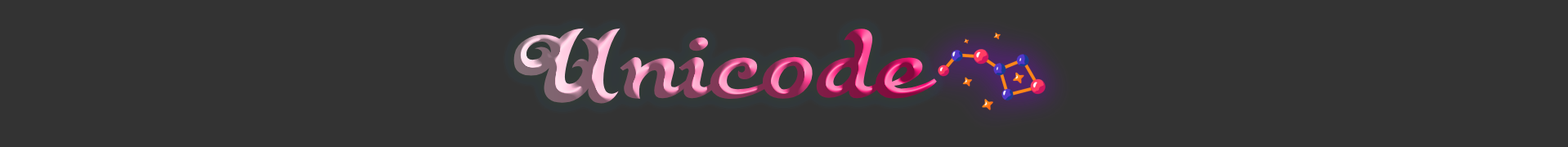
<style>
.page{position:relative;width:1568px;height:147px;background:#333333}
.page>*{position:absolute;margin:0}
.t1{font:108.8px "BlackRose";scale:1.2 1}
</style>
<div class="page">
<p class="t1" style="left:513px;top:28px;width:424px;height:76px">Unicode</p>
</div>
